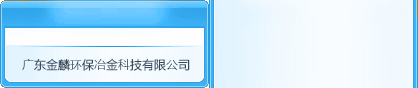
<style>
.page{position:relative;width:418px;height:88px}
.page>*{position:absolute;margin:0}
.t1{font:12px "MicrosoftYaHeiLight";color:#34495e}
</style>
<div class="page">
<p class="t1" style="left:22px;top:58px;width:168px;height:13px">广东金麟环保冶金科技有限公司</p>
</div>
